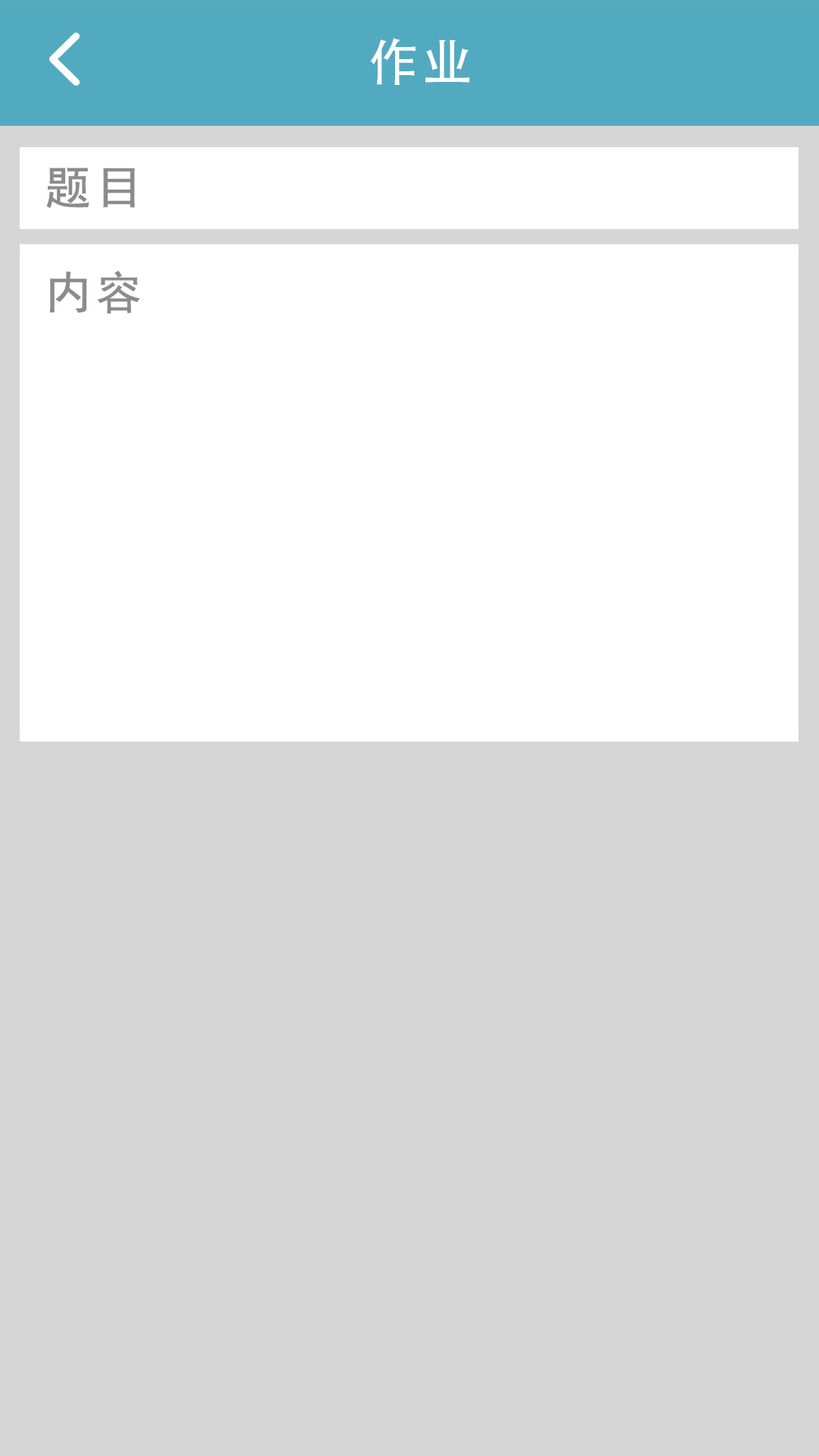
<style>
.page{position:relative;width:819px;height:1456px;background:#d6d6d6}
.page>*{position:absolute;margin:0}
.t1{font:50.8px "AdobeHeitiStd-Regular";letter-spacing:0.06em;color:#ffffff}
.t2{font:45.5px "SimHei";letter-spacing:0.08em;color:#8c8c8c;font-weight:bold}
</style>
<div class="page">
<p class="t1" style="left:370px;top:38px;width:99px;height:47px">作业</p>
<p class="t2" style="left:46px;top:168px;width:89px;height:41px">题目</p>
<p class="t2" style="left:49px;top:271px;width:91px;height:43px">内容</p>
</div>
